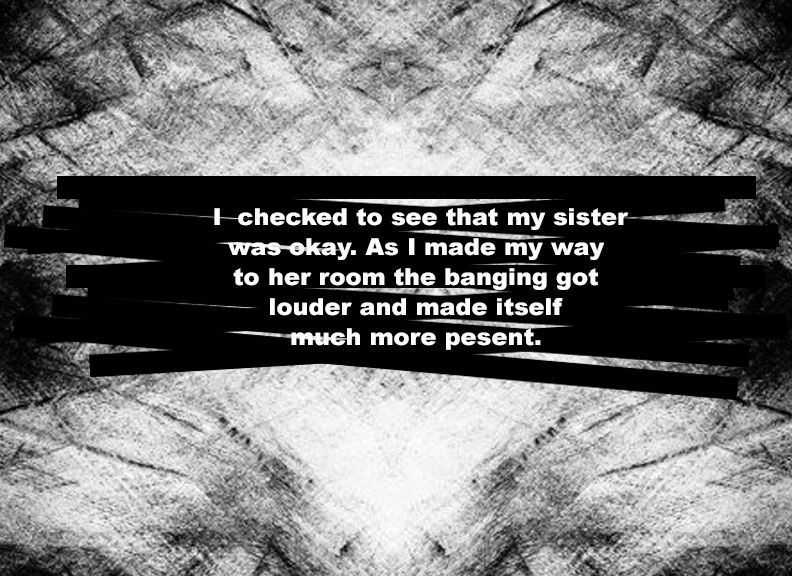
<style>
.page{position:relative;width:792px;height:576px;background:#000000}
.page>*{position:absolute;margin:0}
.t1{font:23.5px/30px "Arial-Black";color:#fbfdfc}
</style>
<div class="page">
<p class="t1" style="left:214px;top:208px;width:415px;height:142px;text-align:center">I  checked to see that my sister<br>was okay. As I made my way <br>to her room the banging got <br>louder and made itself <br>much more pesent.</p>
</div>
